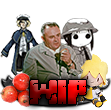
<style>
.page{position:relative;width:111px;height:110px;background:#ffffff}
.page>*{position:absolute;margin:0}
.t1{font:33.7px "MinecraftEvenings";letter-spacing:0.001em}
</style>
<div class="page">
<p class="t1" style="left:30px;top:80px;width:56px;height:24px">WIP</p>
</div>
